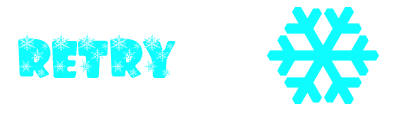
<style>
.page{position:relative;width:398px;height:116px;background:#ffffff}
.page>*{position:absolute;margin:0}
.t1{font:60px "winterflakes";color:#0ffcff}
</style>
<div class="page">
<p class="t1" style="left:18px;top:34px;width:158px;height:44px">RETRY</p>
</div>
